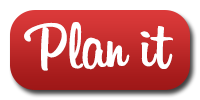
<style>
.page{position:relative;width:200px;height:100px;background:#ffffff}
.page>*{position:absolute;margin:0}
.t1{font:66.7px "Billabong";color:#ffffff}
</style>
<div class="page">
<p class="t1" style="left:24px;top:22px;width:149px;height:49px">Plan it</p>
</div>
